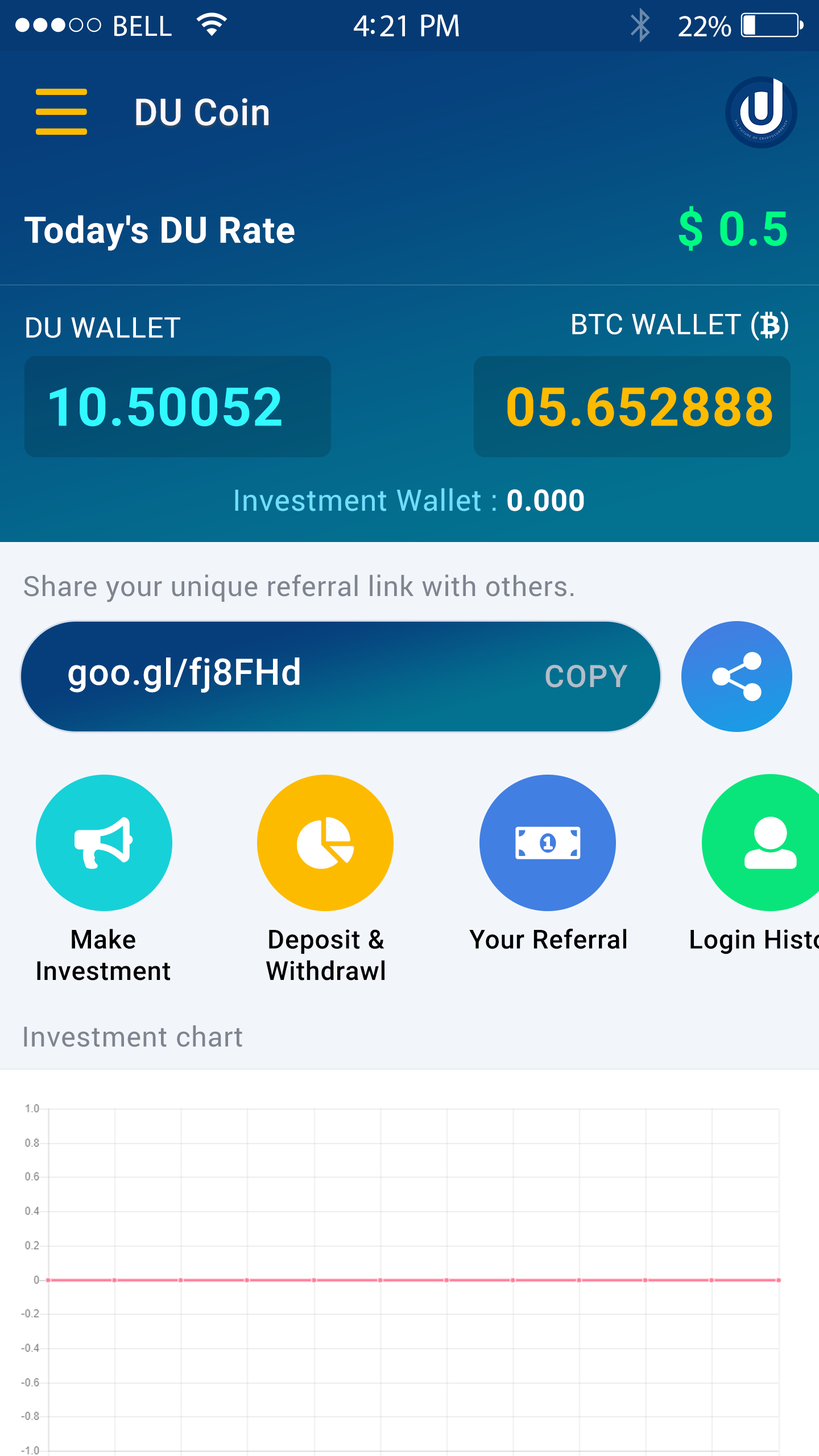
<style>
.page{position:relative;width:819px;height:1456px;background:#ffffff}
.page>*{position:absolute;margin:0}
.t1{font:29.4px "MyriadPro-Regular";letter-spacing:0.02em;color:#ffffff}
.t2{font:32px "MyriadPro-Regular";letter-spacing:-0.02em;color:#ffffff}
.t3{font:30.7px "MyriadPro-Regular";letter-spacing:-0.02em;color:#ffffff}
.t4{font:37px "Roboto-Medium";letter-spacing:0.02em;color:#fbf7ff}
.t5{font:47.8px "Roboto-Bold";letter-spacing:0.02em;color:#00fd83}
.t6{font:36.4px "Roboto-Bold";letter-spacing:0.02em;color:#ffffff}
.t7{font:28.4px "Roboto-Regular";letter-spacing:0.02em;color:#ffffff;text-transform:uppercase}
.t8{font:53.5px "Roboto-Bold";letter-spacing:0.02em;color:#32f8ff}
.t9{font:53.5px "Roboto-Bold";letter-spacing:0.02em;color:#fdbb00}
.t10{font:29.6px "Roboto-Regular";letter-spacing:0.02em;color:#71deff}
.t11{font:29.6px "Roboto-Bold";letter-spacing:0.02em;color:#ffffff}
.t12{font:27.9px "Roboto-Regular";letter-spacing:0.02em;color:#7e858f}
.t13{font:36.4px "Roboto-Medium";letter-spacing:0.02em;color:#ffffff}
.t14{font:30.7px "Roboto-Medium";letter-spacing:0.04em;color:#b2bdc9}
.t15{font:26.2px "Roboto-Medium";letter-spacing:0.02em;color:#000000}
</style>
<div class="page">
<p class="t1" style="left:114px;top:15px;width:58px;height:21px">BELL</p>
<p class="t2" style="left:354px;top:14px;width:105px;height:22px">4:21 PM</p>
<p class="t3" style="left:679px;top:16px;width:52px;height:21px">22%</p>
<p class="t4" style="left:136px;top:98px;width:132px;height:28px">DU Coin</p>
<p class="t5" style="left:679px;top:206px;width:108px;height:45px">$ 0.5</p>
<p class="t6" style="left:24px;top:215px;width:271px;height:36px">Today's DU Rate</p>
<p class="t7" style="left:26px;top:317px;width:154px;height:21px">Du Wallet</p>
<p class="t8" style="left:49px;top:387px;width:233px;height:40px">10.50052</p>
<p class="t9" style="left:507px;top:387px;width:265px;height:40px">05.652888</p>
<p class="t10" style="left:235px;top:488px;width:349px;height:23px">Investment Wallet : <span class="t11">0.000</span></p>
<p class="t12" style="left:24px;top:574px;width:549px;height:28px">Share your unique referral link with others.</p>
<p class="t13" style="left:68px;top:657px;width:232px;height:36px">goo.gl/fj8FHd</p>
<p class="t14" style="left:545px;top:665px;width:83px;height:23px">COPY</p>
<p class="t15" style="left:37px;top:929px;width:133px;height:52px;text-align:center">Make<br>Investment</p>
<p class="t15" style="left:266px;top:929px;width:118px;height:52px;text-align:center">Deposit &amp;<br>Withdrawl</p>
<p class="t15" style="left:469px;top:928px;width:157px;height:21px">Your Referral</p>
<p class="t12" style="left:24px;top:1025px;width:218px;height:22px">Investment chart</p>
</div>
